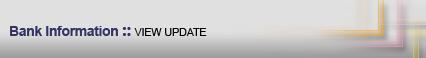
<style>
.page{position:relative;width:426px;height:58px;background:#e1e0e0}
.page>*{position:absolute;margin:0}
.t1{font:14px "Arial-BoldMT";letter-spacing:-0.025em;color:#333366}
.t2{font:18px "SegoeUI-Bold";letter-spacing:-0.025em;color:#333366}
.t3{font:11px "ArialMT";letter-spacing:-0.025em;color:#070707}
</style>
<div class="page">
<p class="t1" style="left:10px;top:26px;width:197px;height:10px">Bank Information <span class="t2">:: </span><span class="t3">VIEW UPDATE</span></p>
</div>
